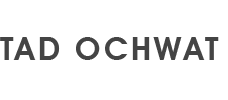
<style>
.page{position:relative;width:228px;height:100px;background:#ffffff}
.page>*{position:absolute;margin:0}
.t1{font:32px "AvantGardeITCbyBT-Demi";letter-spacing:0.1em;color:#444444;text-transform:uppercase}
</style>
<div class="page">
<p class="t1" style="left:0px;top:37px;width:219px;height:23px">Tad Ochwat</p>
</div>
